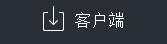
<style>
.page{position:relative;width:167px;height:44px;background:#292f37}
.page>*{position:absolute;margin:0}
.t1{font:16px "NSimSun";letter-spacing:0.05em;color:#ffffff}
</style>
<div class="page">
<p class="t1" style="left:75px;top:12px;width:49px;height:16px">客户端</p>
</div>
